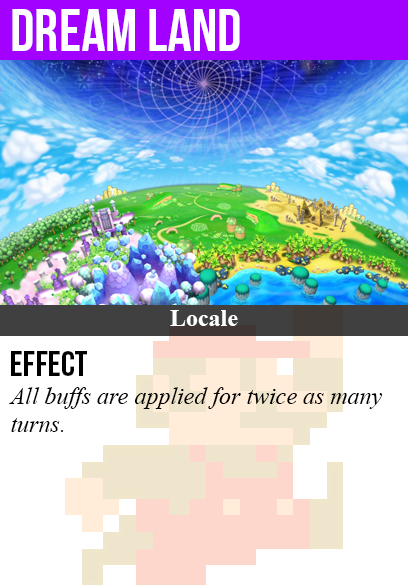
<style>
.page{position:relative;width:408px;height:585px;background:#ffffff}
.page>*{position:absolute;margin:0}
.t1{font:60px "BebasNeue";color:#ffffff}
.t2{font:24px "TimesNewRomanPS-BoldMT";color:#ffffff}
.t3{font:36px "BebasNeue";color:#000000}
.t4{font:24px "TimesNewRomanPS-ItalicMT";color:#000000}
</style>
<div class="page">
<p class="t1" style="left:12px;top:9px;width:228px;height:42px">dream land</p>
<p class="t2" style="left:170px;top:310px;width:68px;height:16px">Locale</p>
<p class="t3" style="left:11px;top:351px;width:76px;height:25px">Effect</p>
<p class="t4" style="left:9px;top:387px;width:374px;height:45px">All buffs are applied for twice as many<br>turns.</p>
</div>
